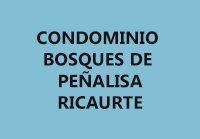
<style>
.page{position:relative;width:200px;height:139px;background:#82bed4}
.page>*{position:absolute;margin:0}
.t1{font:18px "SegoeUI-Bold";color:#141414}
</style>
<div class="page">
<p class="t1" style="left:37px;top:31px;width:121px;height:78px;text-align:center">CONDOMINIO <br>BOSQUES DE <br>PEÑALISA<br>RICAURTE</p>
</div>
